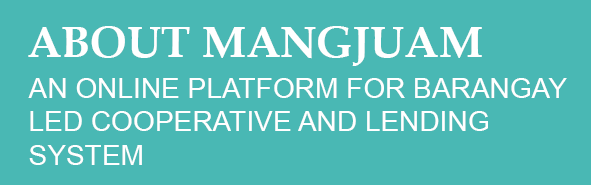
<style>
.page{position:relative;width:591px;height:185px;background:#49b8b4}
.page>*{position:absolute;margin:0}
.t1{font:44px "BookAntiqua-Bold";color:#ffffff}
.t2{font:28.1px "ArialMT";color:#ffffff}
</style>
<div class="page">
<p class="t1" style="left:28px;top:26px;width:454px;height:40px">ABOUT MANGJUAM</p>
<p class="t2" style="left:28px;top:78px;width:539px;height:87px">AN ONLINE PLATFORM FOR BARANGAY <br>LED COOPERATIVE AND LENDING <br>SYSTEM</p>
</div>
